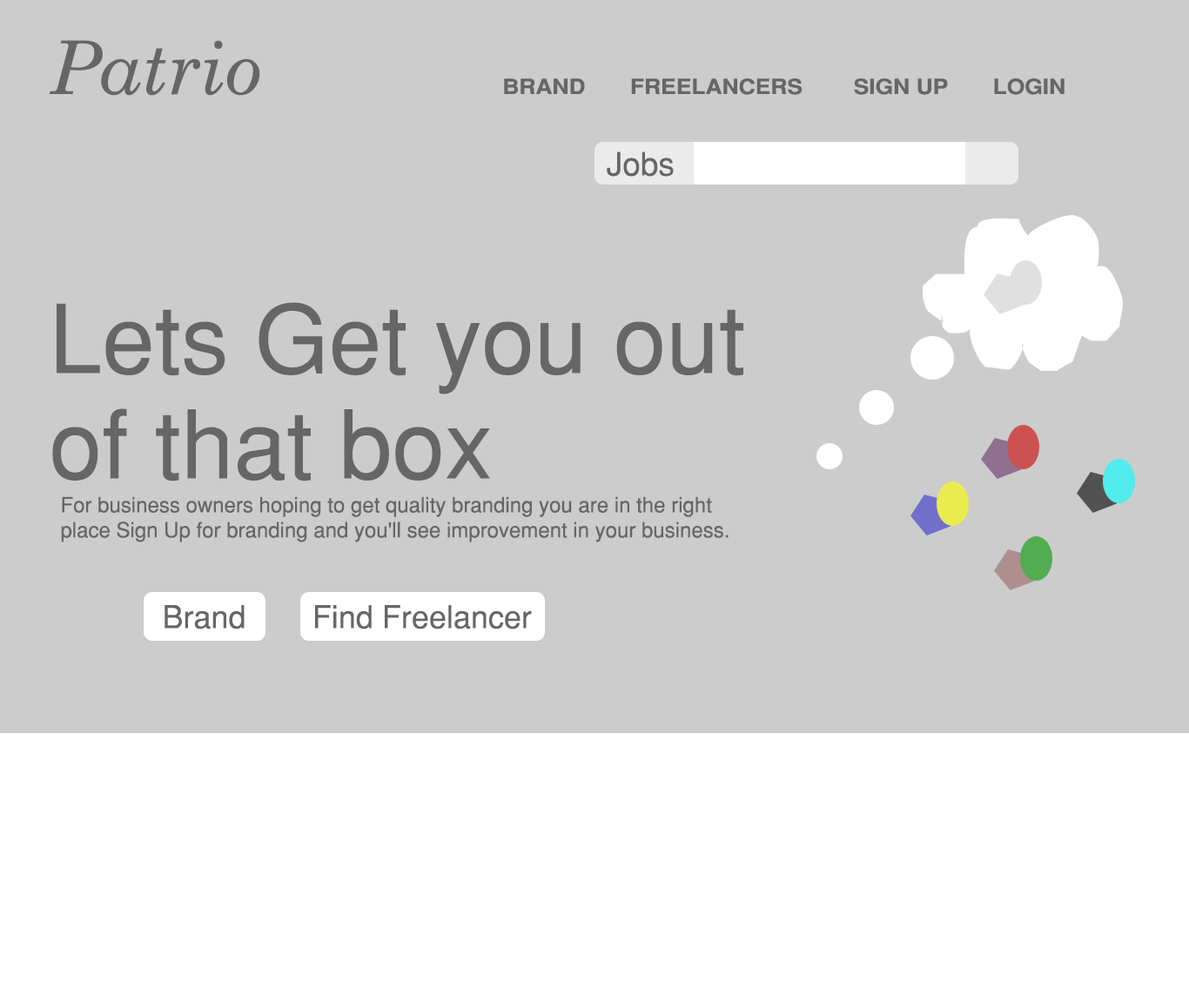
<style>
.page{position:relative;width:1189px;height:1003px;background:#cccccc}
.page>*{position:absolute;margin:0}
.t1{font:74px "CenturySchoolbook-Italic";color:#666666}
.t2{font:20.9px "SansSerifBold";color:#666666;text-transform:uppercase;scale:1.1 1}
.t3{font:20.9px "SansSerifBold";color:#666666;scale:1.1 1}
.t4{font:32.2px "SansSerif";color:#666666}
.t5{font:94.9px/105.3px "SansSerif";color:#666666}
.t6{font:20.9px "SansSerif";color:#666666}
.t7{font:31.3px "SansSerif";color:#666666}
</style>
<div class="page">
<p class="t1" style="left:49px;top:40px;width:211px;height:56px">Patrio</p>
<p class="t2" style="left:504px;top:78px;width:561px;height:17px"><span class="t3">BRAND       </span>Freelancers        sIGN UP       LOGIN</p>
<p class="t4" style="left:607px;top:151px;width:67px;height:26px">Jobs</p>
<p class="t5" style="left:52px;top:302px;width:691px;height:179px">Lets Get you out <br>of that box</p>
<p class="t6" style="left:61px;top:496px;width:668px;height:46px">For business owners hoping to get quality branding you are in the right place Sign Up for branding and you'll see improvement in your business.</p>
<p class="t7" style="left:165px;top:605px;width:80px;height:24px">Brand</p>
<p class="t7" style="left:315px;top:605px;width:217px;height:24px">Find Freelancer</p>
</div>
